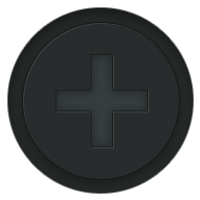
<style>
.page{position:relative;width:200px;height:200px;background:#282c2c}
.page>*{position:absolute;margin:0}
.t1{font:208.3px "GothamNarrow-Medium";letter-spacing:-0.02em;color:#393939;text-transform:uppercase}
</style>
<div class="page">
<p class="t1" style="left:55px;top:54px;width:93px;height:94px">+</p>
</div>
